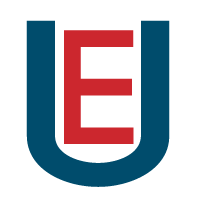
<style>
.page{position:relative;width:200px;height:200px;background:#ffffff}
.page>*{position:absolute;margin:0}
.t1{font:234.7px "Code-Bold";color:#004c6c;scale:1.17 1}
.t2{font:162.3px "Code-Bold";color:#cc272e}
</style>
<div class="page">
<p class="t1" style="left:26px;top:20px;width:144px;height:167px">U</p>
<p class="t2" style="left:64px;top:30px;width:70px;height:114px">E</p>
</div>
